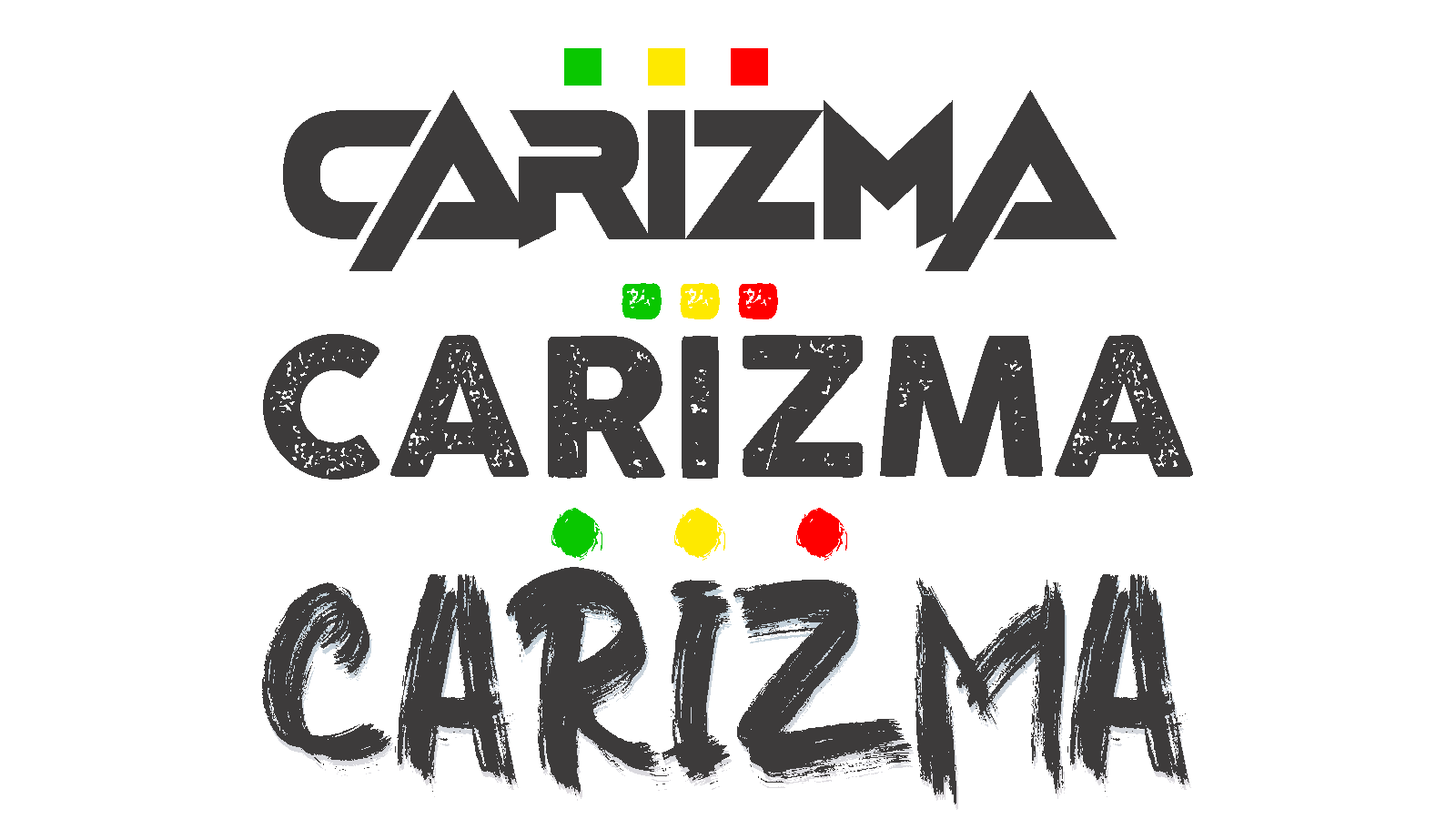
<style>
.page{position:relative;width:1456px;height:819px;background:#ffffff}
.page>*{position:absolute;margin:0}
.t1{font:189.6px "FastHand";color:#09c700}
.t2{font:189.6px "FastHand";color:#fee900}
.t3{font:189.6px "FastHand";color:#ff0000}
.t4{font:189.6px "FastHand";color:#3d3b3b}
.t5{font:189.6px "CocogoosePro-Letterpress";color:#09c700}
.t6{font:189.6px "CocogoosePro-Letterpress";color:#fee900}
.t7{font:189.6px "CocogoosePro-Letterpress";color:#ff0000}
.t8{font:189.6px "CocogoosePro-Letterpress";color:#3d3b3b}
.t9{font:189.6px "HigherJump";color:#09c700}
.t10{font:189.6px "HigherJump";color:#fee900}
.t11{font:189.6px "HigherJump";color:#ff0000}
.t12{font:126.4px/12.6px "HigherJump";color:#3d3b3b}
</style>
<div class="page">
<p class="t1" style="left:564px;top:48px;width:204px;height:38px">. <span class="t2">. </span><span class="t3">.</span></p>
<p class="t4" style="left:283px;top:90px;width:834px;height:158px">CARIZMA</p>
<p class="t5" style="left:622px;top:283px;width:156px;height:36px">.<span class="t6">.</span><span class="t7">.</span></p>
<p class="t8" style="left:263px;top:334px;width:930px;height:146px">CARIZMA</p>
<p class="t9" style="left:551px;top:508px;width:296px;height:53px">. <span class="t10">. </span><span class="t11">.</span></p>
<p class="t12" style="left:262px;top:567px;width:927px;height:237px;text-align:center">CARIZMA</p>
<p class="t12" style="left:264px;top:572px;width:927px;height:238px;text-align:center;opacity:0.5">CARIZMA</p>
</div>
